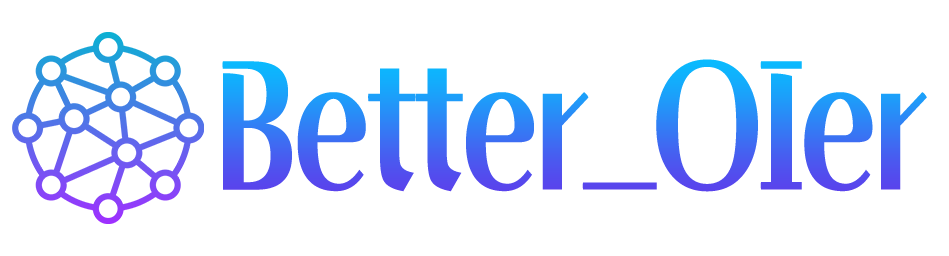
<style>
.page{position:relative;width:949px;height:256px;background:#ffffff}
.page>*{position:absolute;margin:0}
.t1{font:190px "FZHUASTHS--GB1-0";letter-spacing:-0.05em;scale:0.83 1}
</style>
<div class="page">
<p class="t1" style="left:222px;top:59px;width:705px;height:133px">Better_OIer</p>
</div>
